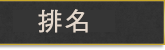
<style>
.page{position:relative;width:165px;height:50px;background:#353535}
.page>*{position:absolute;margin:0}
.t1{font:24px "GothicMB101Pr6N-Light";letter-spacing:0.1em;color:#e4d7cb;font-weight:bold}
</style>
<div class="page">
<p class="t1" style="left:38px;top:9px;width:50px;height:24px">排名</p>
</div>
